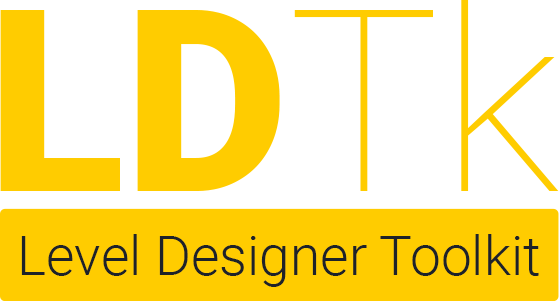
<style>
.page{position:relative;width:559px;height:301px;background:#ffffff}
.page>*{position:absolute;margin:0}
.t1{font:253.8px "Roboto-Black";color:#ffcc00}
.t2{font:253.8px "Roboto-Thin";color:#ffcc00}
.t3{font:55px "Roboto-Light";color:#1e2229}
</style>
<div class="page">
<p class="t1" style="left:0px;top:0px;width:559px;height:191px">LD<span class="t2">Tk</span></p>
<p class="t3" style="left:21px;top:234px;width:518px;height:53px">Level Designer Toolkit</p>
</div>
